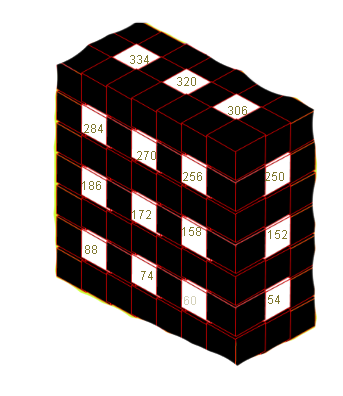
<style>
.page{position:relative;width:343px;height:396px;background:#ffffff}
.page>*{position:absolute;margin:0}
.t1{font:12px "ArialMT";color:#817931}
.t2{font:12px "ArialMT";color:#d4d1b9}
</style>
<div class="page">
<p class="t1" style="left:130px;top:55px;width:19px;height:9px">334</p>
<p class="t1" style="left:177px;top:77px;width:19px;height:9px">320</p>
<p class="t1" style="left:228px;top:106px;width:19px;height:9px">306</p>
<p class="t1" style="left:84px;top:124px;width:19px;height:9px">284</p>
<p class="t1" style="left:137px;top:151px;width:19px;height:9px">270</p>
<p class="t1" style="left:183px;top:172px;width:19px;height:9px">256</p>
<p class="t1" style="left:265px;top:172px;width:19px;height:9px">250</p>
<p class="t1" style="left:82px;top:181px;width:19px;height:9px">186</p>
<p class="t1" style="left:132px;top:210px;width:19px;height:9px">172</p>
<p class="t1" style="left:182px;top:227px;width:19px;height:9px">158</p>
<p class="t1" style="left:268px;top:230px;width:19px;height:9px">152</p>
<p class="t1" style="left:85px;top:245px;width:12px;height:9px">88</p>
<p class="t1" style="left:141px;top:271px;width:12px;height:9px">74</p>
<p class="t2" style="left:184px;top:296px;width:12px;height:9px">60</p>
<p class="t1" style="left:268px;top:295px;width:12px;height:9px">54</p>
</div>
